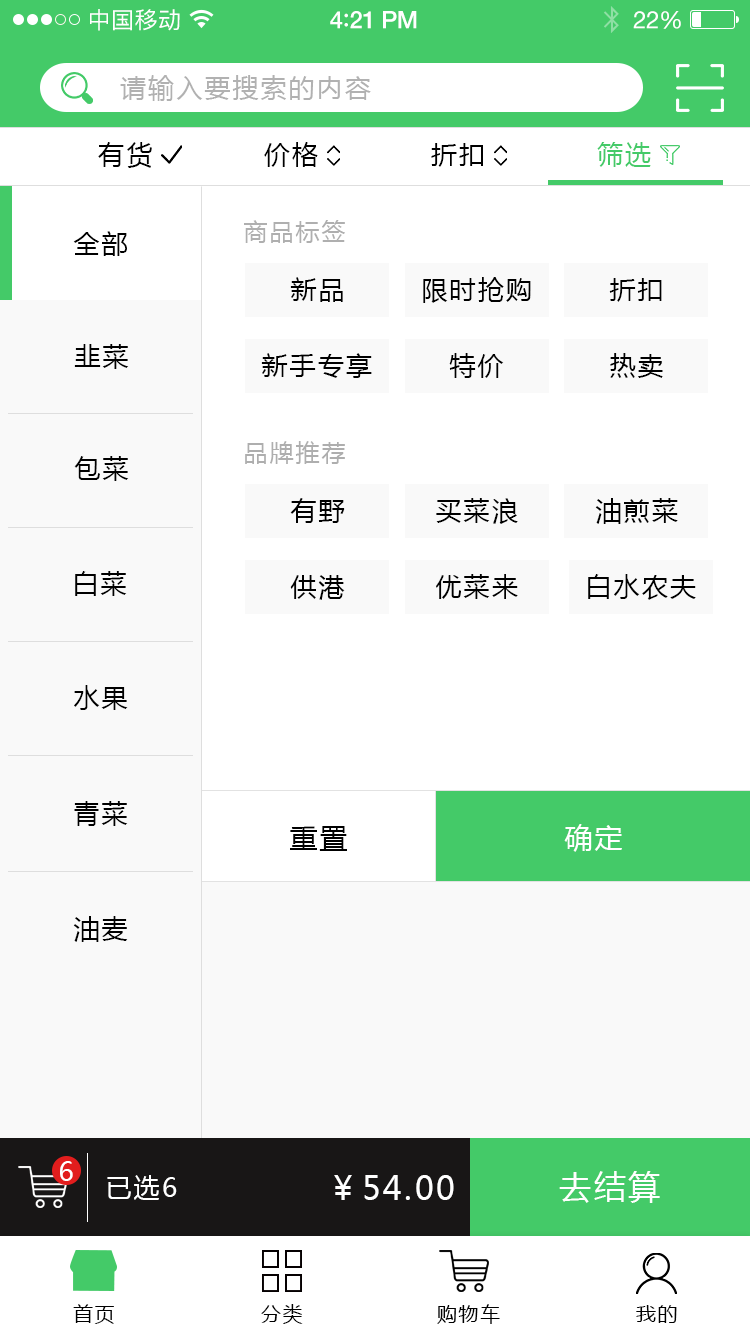
<style>
.page{position:relative;width:750px;height:1334px;background:#ffffff}
.page>*{position:absolute;margin:0}
.t1{font:23px "PingFangSC-Regular";letter-spacing:0.02em;color:#ffffff}
.t2{font:24px "HelveticaNeue-Medium";letter-spacing:-0.02em;color:#ffffff}
.t3{font:26px "Avenir-Medium";letter-spacing:-0.02em;color:#ffffff}
.t4{font:24px "HelveticaNeue";letter-spacing:-0.02em;color:#ffffff}
.t5{font:26px "MicrosoftYaHei";letter-spacing:0.08em;color:#b1b1b1;text-transform:uppercase}
.t6{font:26px "MicrosoftYaHei";letter-spacing:0.08em;color:#000000;text-transform:uppercase}
.t7{font:26px "MicrosoftYaHei";letter-spacing:0.08em;color:#44ca68;text-transform:uppercase}
.t8{font:24px "MicrosoftYaHei";letter-spacing:0.08em;color:#aeaeae;text-transform:uppercase}
.t9{font:28px "MicrosoftYaHei";letter-spacing:0.08em;color:#000000;text-transform:uppercase}
.t10{font:28px "MicrosoftYaHei";letter-spacing:0.08em;color:#ffffff;text-transform:uppercase}
.t11{font:26px "MicrosoftYaHei";letter-spacing:0.08em;color:#ffffff;text-transform:uppercase}
.t12{font:32px "MicrosoftYaHei";letter-spacing:0.08em;color:#ffffff;text-transform:uppercase}
.t13{font:20px "MicrosoftYaHei";letter-spacing:0.08em;color:#000000;text-transform:uppercase}
</style>
<div class="page">
<p class="t1" style="left:90px;top:9px;width:90px;height:22px">中国移动</p>
<p class="t2" style="left:330px;top:11px;width:87px;height:18px">4<span class="t3">:</span>21 PM</p>
<p class="t4" style="left:633px;top:11px;width:48px;height:18px">22%</p>
<p class="t5" style="left:120px;top:75px;width:251px;height:26px">请输入要搜索的内容</p>
<p class="t6" style="left:98px;top:142px;width:54px;height:26px">有货</p>
<p class="t6" style="left:264px;top:142px;width:54px;height:25px">价格</p>
<p class="t6" style="left:431px;top:143px;width:52px;height:24px">折扣</p>
<p class="t7" style="left:597px;top:142px;width:54px;height:25px">筛选</p>
<p class="t8" style="left:244px;top:220px;width:101px;height:23px">商品标签</p>
<p class="t6" style="left:73px;top:231px;width:54px;height:25px">全部</p>
<p class="t6" style="left:290px;top:277px;width:53px;height:25px">新品</p>
<p class="t6" style="left:423px;top:277px;width:108px;height:26px">限时抢购</p>
<p class="t6" style="left:609px;top:278px;width:53px;height:24px">折扣</p>
<p class="t6" style="left:74px;top:344px;width:55px;height:25px">韭菜</p>
<p class="t6" style="left:261px;top:353px;width:111px;height:25px">新手专享</p>
<p class="t6" style="left:449px;top:353px;width:55px;height:25px">特价</p>
<p class="t6" style="left:610px;top:353px;width:53px;height:25px">热卖</p>
<p class="t8" style="left:245px;top:441px;width:100px;height:23px">品牌推荐</p>
<p class="t6" style="left:74px;top:456px;width:55px;height:25px">包菜</p>
<p class="t6" style="left:290px;top:498px;width:55px;height:25px">有野</p>
<p class="t6" style="left:436px;top:498px;width:82px;height:26px">买菜浪</p>
<p class="t6" style="left:595px;top:498px;width:83px;height:26px">油煎菜</p>
<p class="t6" style="left:75px;top:571px;width:52px;height:25px">白菜</p>
<p class="t6" style="left:290px;top:575px;width:55px;height:25px">供港</p>
<p class="t6" style="left:436px;top:574px;width:82px;height:25px">优菜来</p>
<p class="t6" style="left:588px;top:574px;width:108px;height:26px">白水农夫</p>
<p class="t6" style="left:74px;top:685px;width:54px;height:25px">水果</p>
<p class="t6" style="left:74px;top:801px;width:54px;height:25px">青菜</p>
<p class="t9" style="left:290px;top:826px;width:57px;height:25px">重置</p>
<p class="t10" style="left:564px;top:824px;width:58px;height:28px">确定</p>
<p class="t6" style="left:73px;top:916px;width:55px;height:26px">油麦</p>
<p class="t11" style="left:60px;top:1161px;width:13px;height:20px">6</p>
<p class="t11" style="left:107px;top:1175px;width:70px;height:25px">已选6</p>
<p class="t12" style="left:334px;top:1175px;width:120px;height:25px">￥54.00</p>
<p class="t12" style="left:559px;top:1171px;width:101px;height:32px">去结算</p>
<p class="t13" style="left:73px;top:1304px;width:41px;height:20px">首页</p>
<p class="t13" style="left:261px;top:1304px;width:42px;height:20px">分类</p>
<p class="t13" style="left:437px;top:1304px;width:63px;height:20px">购物车</p>
<p class="t13" style="left:636px;top:1305px;width:41px;height:18px">我的</p>
</div>
